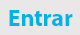
<style>
.page{position:relative;width:80px;height:35px;background:#e9e7e7}
.page>*{position:absolute;margin:0}
.t1{font:23.5px "MyriadPro-Bold";color:#00b2e8}
</style>
<div class="page">
<p class="t1" style="left:9px;top:10px;width:64px;height:16px">Entrar</p>
</div>
